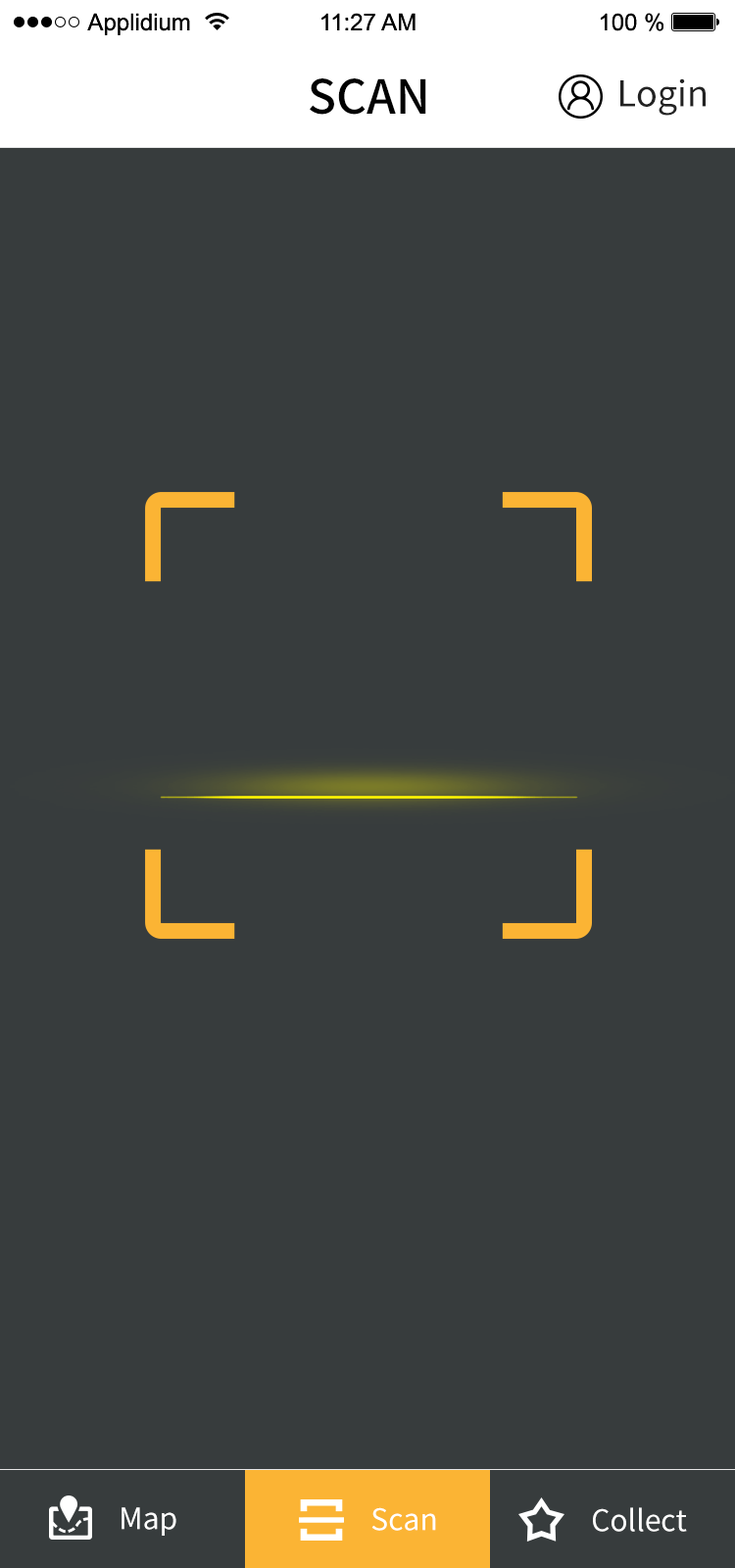
<style>
.page{position:relative;width:735px;height:1568px;background:#373c3d}
.page>*{position:absolute;margin:0}
.t1{font:47px "SourceHanSansCN-Medium";color:#010101;text-transform:uppercase}
.t2{font:35.3px "SourceHanSansCN-Regular";color:#222222}
.t3{font:29.4px "SourceHanSansCN-Regular";color:#ffffff}
</style>
<div class="page">
<p class="t1" style="left:310px;top:78px;width:116px;height:37px">Scan</p>
<p class="t2" style="left:620px;top:78px;width:86px;height:38px">Login</p>
<p class="t3" style="left:122px;top:1507px;width:54px;height:29px">Map</p>
<p class="t3" style="left:371px;top:1507px;width:65px;height:24px">Scan</p>
<p class="t3" style="left:593px;top:1507px;width:94px;height:25px">Collect</p>
</div>
